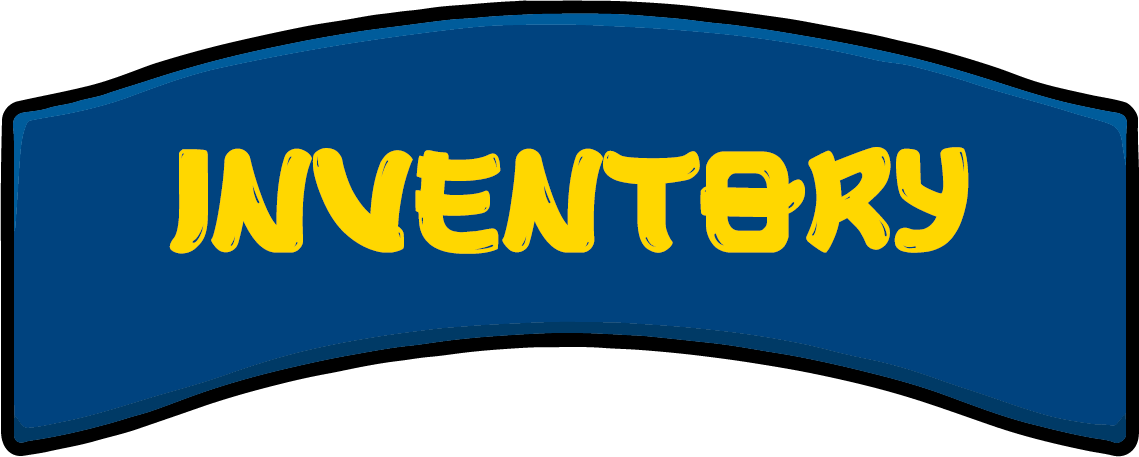
<style>
.page{position:relative;width:1139px;height:457px;background:#00437f}
.page>*{position:absolute;margin:0}
.t1{font:150px "SamuraiBlastRegular";color:#ffd700}
</style>
<div class="page">
<p class="t1" style="left:169px;top:147px;width:800px;height:107px">Inventory</p>
</div>
